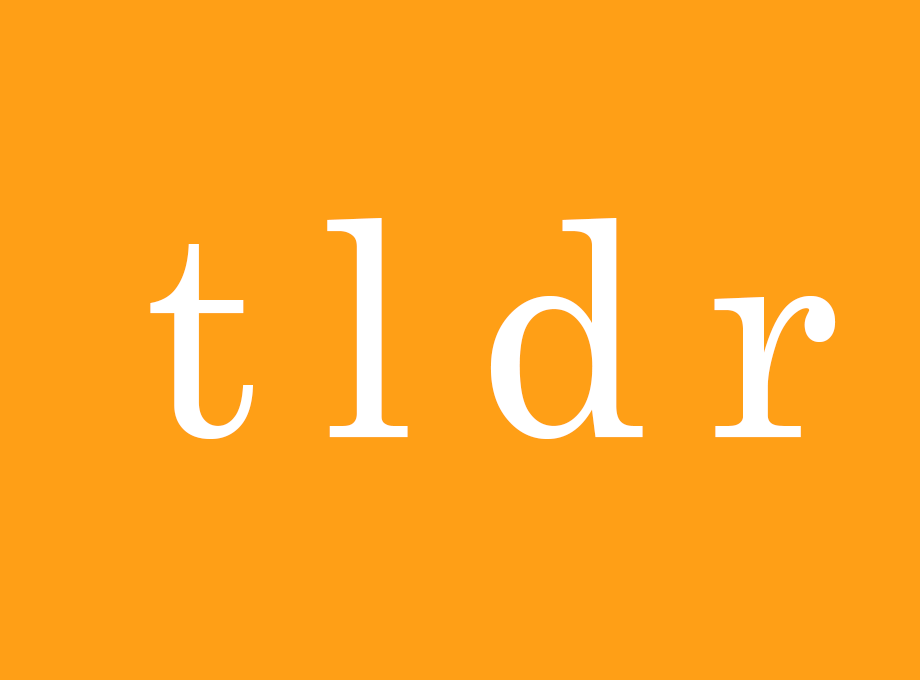
<style>
.page{position:relative;width:920px;height:680px;background:#ff9f16}
.page>*{position:absolute;margin:0}
.t1{font:300px "CenturySchoolbook";letter-spacing:0.2em;color:#ffffff}
</style>
<div class="page">
<p class="t1" style="left:150px;top:218px;width:686px;height:221px">tldr</p>
</div>
